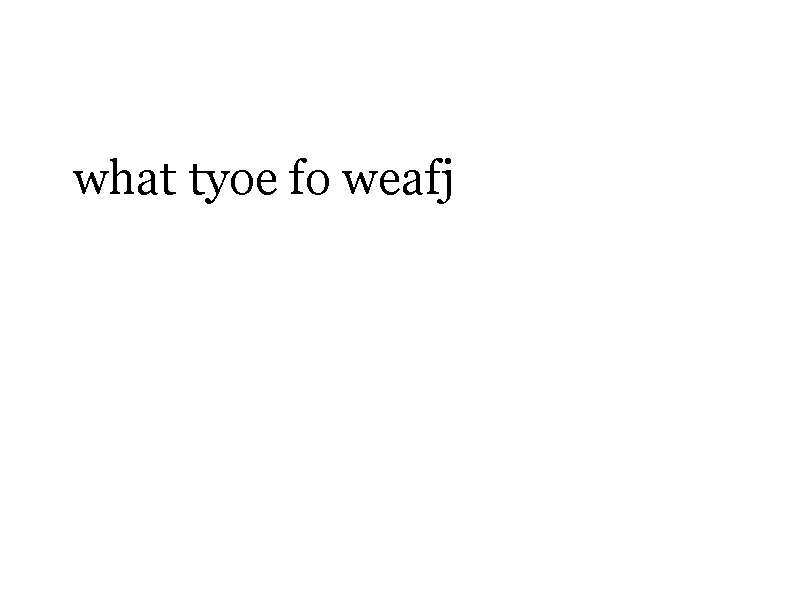
<style>
.page{position:relative;width:800px;height:600px;background:#ffffff}
.page>*{position:absolute;margin:0}
.t1{font:48px "Georgia";color:#000000}
</style>
<div class="page">
<p class="t1" style="left:73px;top:158px;width:378px;height:46px">what tyoe fo weafj</p>
</div>
